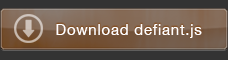
<style>
.page{position:relative;width:228px;height:60px;background:#333333}
.page>*{position:absolute;margin:0}
.t1{font:15px "HelveticaNeue";letter-spacing:0.05em;color:#fefefe}
</style>
<div class="page">
<p class="t1" style="left:56px;top:24px;width:146px;height:14px">Download defiant.js</p>
</div>
